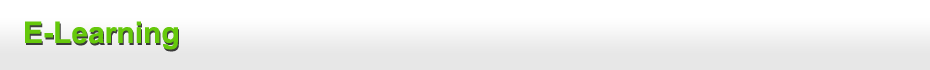
<style>
.page{position:relative;width:930px;height:70px;background:#ffffff}
.page>*{position:absolute;margin:0}
.t1{font:30px "Arial-BoldMT";color:#65c80b}
</style>
<div class="page">
<p class="t1" style="left:25px;top:21px;width:153px;height:29px">E-Learning</p>
</div>
